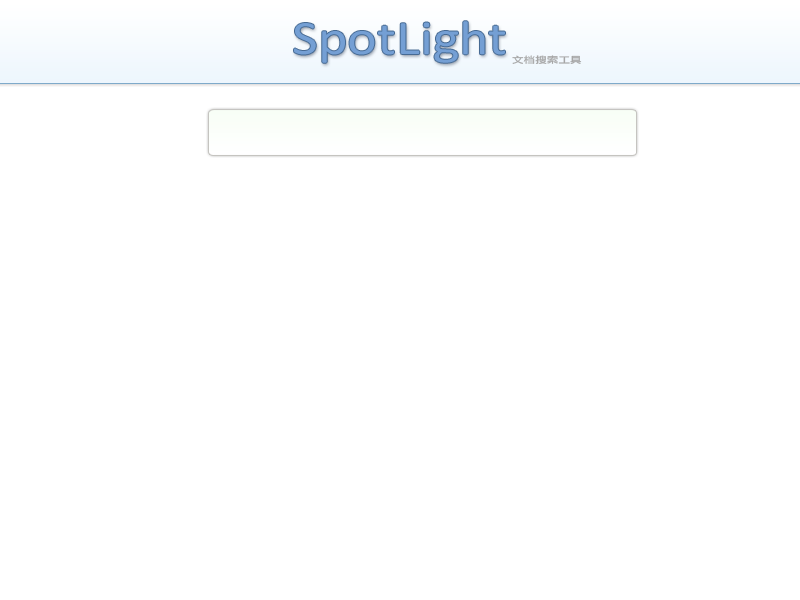
<style>
.page{position:relative;width:800px;height:600px;background:#ffffff}
.page>*{position:absolute;margin:0}
.t1{font:48.2px "Calibri";color:#749fd4;scale:1.17 1}
.t2{font:9px "LiHeiPro";color:#a6a6a6;scale:1.29 1}
.t3{font:9px "STXihei";color:#a6a6a6;scale:1.29 1}
</style>
<div class="page">
<p class="t1" style="left:294px;top:21px;width:211px;height:42px">SpotLight</p>
<p class="t2" style="left:512px;top:55px;width:70px;height:9px">文<span class="t3">档</span>搜索工具</p>
</div>
